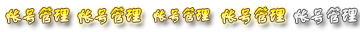
<style>
.page{position:relative;width:360px;height:32px;background:#ffffff}
.page>*{position:absolute;margin:0}
.t1{font:18px "FZSTK--GBK1-0";letter-spacing:-0.14em;font-weight:bold}
.t2{font:16px "FZSTK--GBK1-0";letter-spacing:-0.14em;font-weight:bold}
.t3{font:18px "FZSTK--GBK1-0";letter-spacing:-0.14em;color:#f1f1f1;font-weight:bold}
</style>
<div class="page">
<p class="t1" style="left:6px;top:7px;width:63px;height:17px">帐号管理</p>
<p class="t1" style="left:78px;top:7px;width:63px;height:17px">帐号管理</p>
<p class="t2" style="left:153px;top:8px;width:57px;height:15px">帐号管理</p>
<p class="t1" style="left:221px;top:7px;width:64px;height:17px">帐号管理</p>
<p class="t3" style="left:294px;top:7px;width:63px;height:17px">帐号管理</p>
</div>
